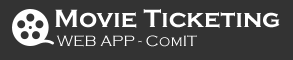
<style>
.page{position:relative;width:293px;height:60px;background:#333333}
.page>*{position:absolute;margin:0}
.t1{font:25.8px/19px "CopperplateGothic-Bold";color:#ffffff}
.t2{font:15.6px/19px "CopperplateGothic-Light";color:#ffffff}
</style>
<div class="page">
<p class="t1" style="left:55px;top:9px;width:225px;height:38px;text-align:right">Movie Ticketing<br> <span class="t2">WEB APP - ComIT</span></p>
</div>
